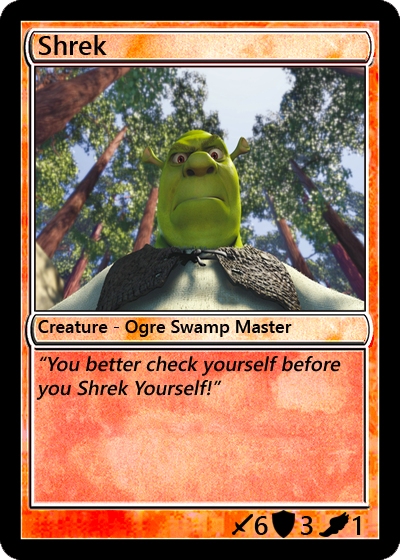
<style>
.page{position:relative;width:400px;height:560px}
.page>*{position:absolute;margin:0}
.t1{font:27px "YuGothicUI-Semibold";color:#000000}
.t2{font:18px "YuGothicUI-Semibold";color:#000000}
.t3{font:20px "YuGothicUI-Semibold";color:#000000;font-style:italic}
</style>
<div class="page">
<p class="t1" style="left:39px;top:35px;width:68px;height:20px">Shrek</p>
<p class="t2" style="left:38px;top:320px;width:254px;height:17px">Creature - Ogre Swamp Master</p>
<p class="t3" style="left:36px;top:356px;width:305px;height:44px">“You better check yourself before you Shrek Yourself!”</p>
<p class="t1" style="left:254px;top:516px;width:14px;height:19px">6</p>
<p class="t1" style="left:301px;top:516px;width:12px;height:19px">3</p>
<p class="t1" style="left:353px;top:516px;width:8px;height:19px">1</p>
</div>
